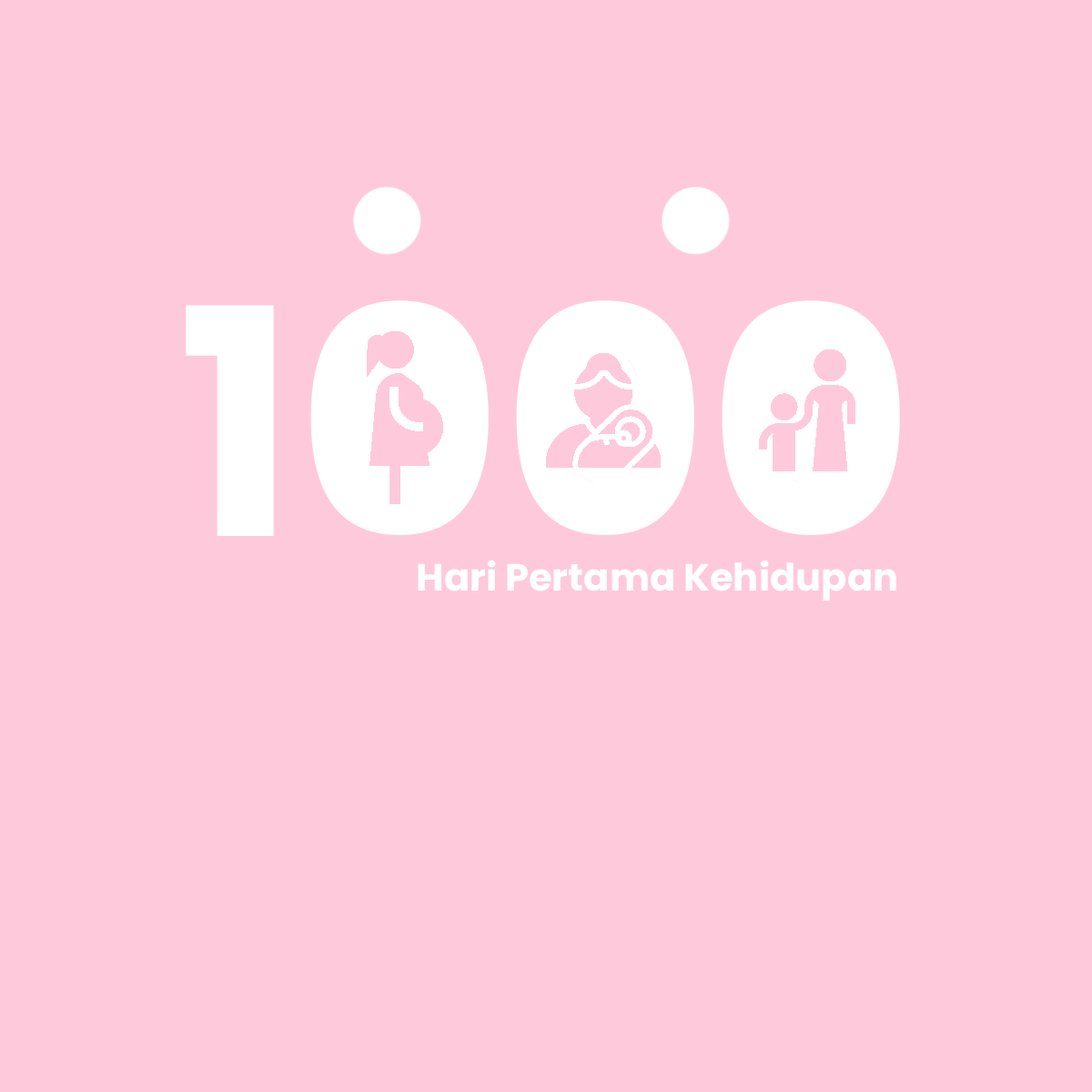
<style>
.page{position:relative;width:1092px;height:1092px;background:#ffc9dc}
.page>*{position:absolute;margin:0}
.t1{font:37.9px "Poppins-Bold";color:#ffffff}
</style>
<div class="page">
<p class="t1" style="left:418px;top:560px;width:478px;height:41px">Hari Pertama Kehidupan</p>
</div>
